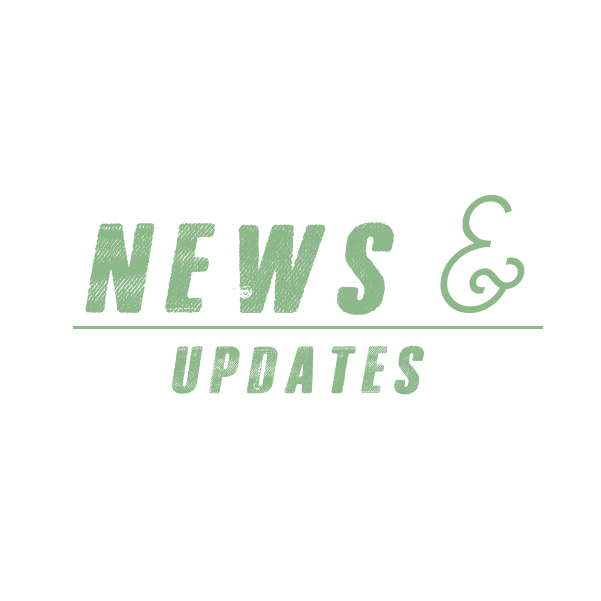
<style>
.page{position:relative;width:601px;height:601px;background:#ffffff}
.page>*{position:absolute;margin:0}
.t1{font:166.7px "Champagne&Limousines";letter-spacing:0.16em;color:#8db98a;font-style:italic}
.t2{font:126.4px "BlackJeans";letter-spacing:0.16em;color:#8db98a;font-style:italic}
.t3{font:66.7px "BlackJeans";letter-spacing:0.16em;color:#8db98a;font-style:italic}
</style>
<div class="page">
<p class="t1" style="left:440px;top:195px;width:85px;height:118px">&amp;</p>
<p class="t2" style="left:85px;top:222px;width:310px;height:93px">NEWS</p>
<p class="t3" style="left:171px;top:345px;width:253px;height:50px">UPDATES</p>
</div>
